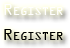
<style>
.page{position:relative;width:70px;height:48px}
.page>*{position:absolute;margin:0}
.t1{font:17px "OCRAExtended";color:#ffffff;font-variant:small-caps}
.t2{font:17px "OCRAExtended";color:#000000;font-variant:small-caps}
</style>
<div class="page">
<p class="t1" style="left:4px;top:4px;width:59px;height:11px">Register</p>
<p class="t2" style="left:4px;top:29px;width:59px;height:11px">Register</p>
</div>
